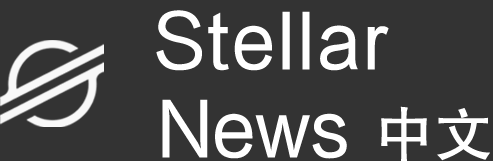
<style>
.page{position:relative;width:493px;height:161px;background:#333333}
.page>*{position:absolute;margin:0}
.t1{font:77px "FZHTJW--GB1-0";letter-spacing:0.038em;color:#ffffff}
.t2{font:77px "FZHTJW--GB1-0";color:#ffffff}
.t3{font:60px "FZHTJW--GB1-0";color:#ffffff}
</style>
<div class="page">
<p class="t1" style="left:156px;top:10px;width:233px;height:61px">Stellar</p>
<p class="t2" style="left:162px;top:99px;width:185px;height:60px">News</p>
<p class="t3" style="left:381px;top:106px;width:109px;height:56px">中文</p>
</div>
